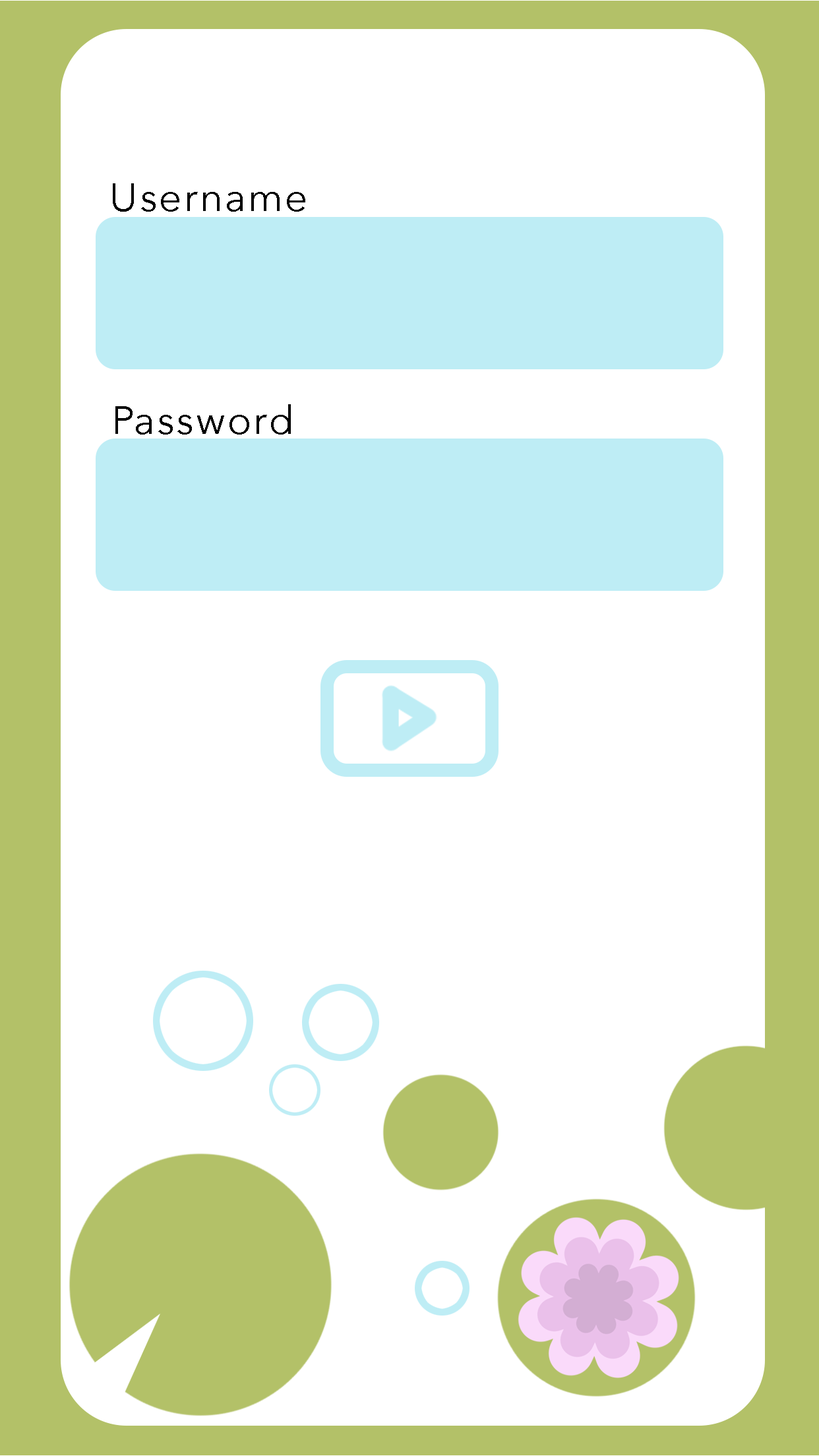
<style>
.page{position:relative;width:819px;height:1456px;background:#ffffff}
.page>*{position:absolute;margin:0}
.t1{font:39.6px "AvenirNext-Regular";letter-spacing:0.05em;color:#000000}
</style>
<div class="page">
<p class="t1" style="left:113px;top:183px;width:192px;height:29px">Username</p>
<p class="t1" style="left:115px;top:404px;width:176px;height:31px">Password</p>
</div>
